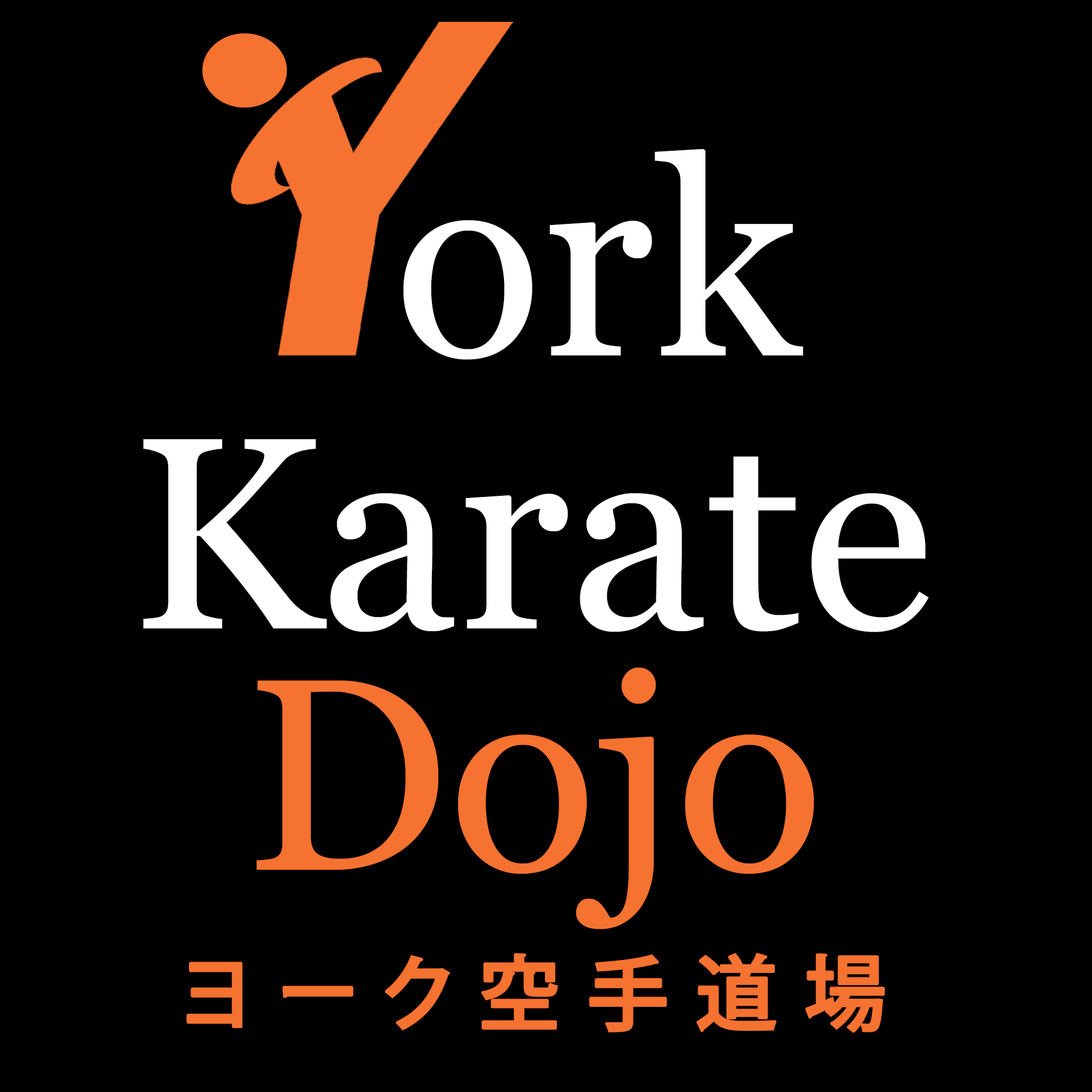
<style>
.page{position:relative;width:1092px;height:1092px;background:#000000}
.page>*{position:absolute;margin:0}
.t1{font:273px/273px "Georgia";letter-spacing:0.001em;color:#ffffff}
.t2{font:341.2px/273px "Georgia";letter-spacing:0.001em;color:#ffffff}
.t3{font:273px "Georgia";letter-spacing:0.001em;color:#f57231}
.t4{font:81.9px "KozGoPr6N-Medium";letter-spacing:0.3em;color:#f57231;font-weight:bold}
</style>
<div class="page">
<p class="t1" style="left:143px;top:149px;width:786px;height:483px"><span class="t2">    </span>ork<br> Karate</p>
<p class="t3" style="left:257px;top:667px;width:557px;height:262px">Dojo</p>
<p class="t4" style="left:186px;top:953px;width:699px;height:80px">ヨーク空手道場</p>
</div>
